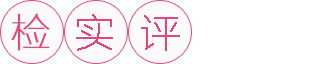
<style>
.page{position:relative;width:320px;height:64px;background:#ffffff}
.page>*{position:absolute;margin:0}
.t1{font:40px "FZLTCXHJW--GB1-0";letter-spacing:-0.025em;color:#e3457d;font-weight:bold}
</style>
<div class="page">
<p class="t1" style="left:11px;top:13px;width:39px;height:38px">检</p>
<p class="t1" style="left:76px;top:14px;width:37px;height:37px">实</p>
<p class="t1" style="left:141px;top:15px;width:39px;height:36px">评</p>
</div>
